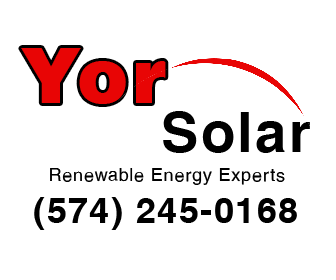
<style>
.page{position:relative;width:336px;height:280px;background:#ffffff}
.page>*{position:absolute;margin:0}
.t1{font:77.3px "HelveticaLT-Black";letter-spacing:0.04em;color:#e80505}
.t2{font:56.3px "HelveticaLT-Bold";letter-spacing:0.04em;color:#000000}
.t3{font:18.2px "HelveticaLT";letter-spacing:0.04em;color:#000000}
.t4{font:36.1px "HelveticaLT-Bold";letter-spacing:0.04em;color:#000000}
</style>
<div class="page">
<p class="t1" style="left:21px;top:48px;width:145px;height:56px">Yor</p>
<p class="t2" style="left:163px;top:111px;width:147px;height:42px">Solar</p>
<p class="t3" style="left:50px;top:168px;width:235px;height:17px">Renewable Energy Experts</p>
<p class="t4" style="left:34px;top:197px;width:263px;height:33px">(574) 245-0168</p>
</div>
